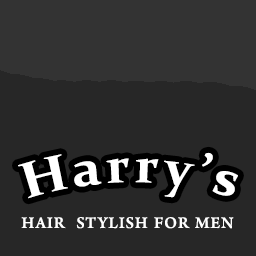
<style>
.page{position:relative;width:256px;height:256px;background:#272727}
.page>*{position:absolute;margin:0}
.t1{font:50.4px "Constantia-Bold";letter-spacing:0.09em;color:#ffffff}
.t2{font:22.8px "AdobeNaskh-Medium";letter-spacing:0.04em;color:#ffffff}
</style>
<div class="page">
<p class="t1" style="left:18px;top:152px;width:220px;height:47px">Harry’s</p>
<p class="t2" style="left:21px;top:217px;width:213px;height:12px">HAIR  STYLISH FOR MEN</p>
</div>
